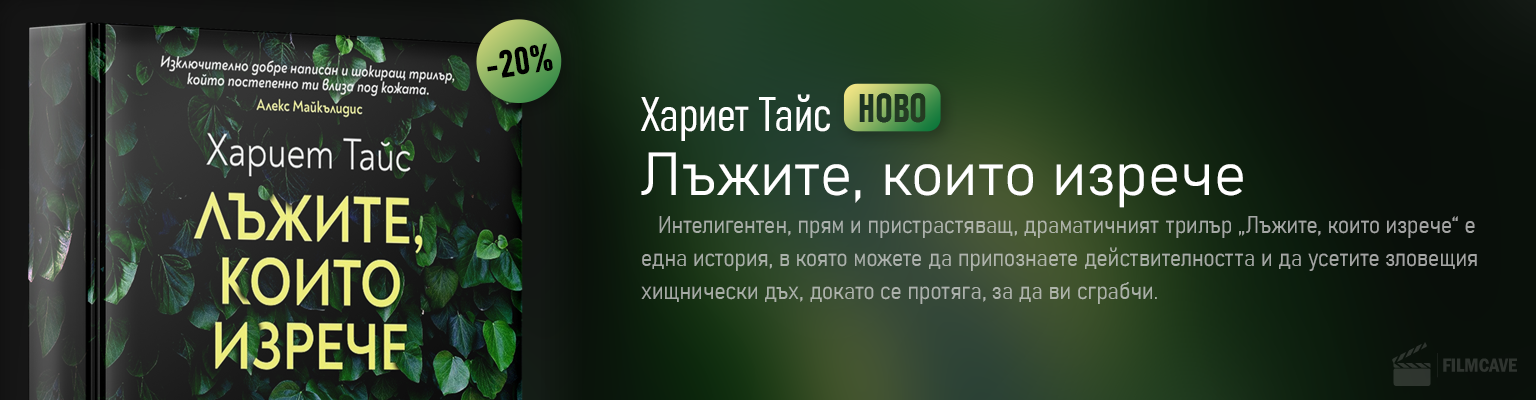
<style>
.page{position:relative;width:1536px;height:400px}
.page>*{position:absolute;margin:0}
.t1{font:38.1px "Bahnschrift-BoldCondensed";color:#000000}
.t2{font:48px "Bahnschrift-LightCondensed";color:#ffffff}
.t3{font:60px "Bahnschrift-Light";color:#ffffff}
.t4{font:24px/33px "Bahnschrift-LightSemiCondensed";color:#a9b0a7}
</style>
<div class="page">
<p class="t1" style="left:487px;top:43px;width:66px;height:35px;rotate:-8deg">-20%</p>
<p class="t2" style="left:641px;top:94px;width:189px;height:47px">Хариет Тайс</p>
<p class="t3" style="left:641px;top:152px;width:602px;height:56px">Лъжите, които изрече</p>
<p class="t4" style="left:641px;top:216px;width:836px;height:88px">Интелигентен, прям и пристрастяващ, драматичният трилър „Лъжите, които изрече“ е <br>една история, в която можете да припознаете действителността и да усетите зловещия <br>хищнически дъх, докато се протяга, за да ви сграбчи.</p>
</div>
